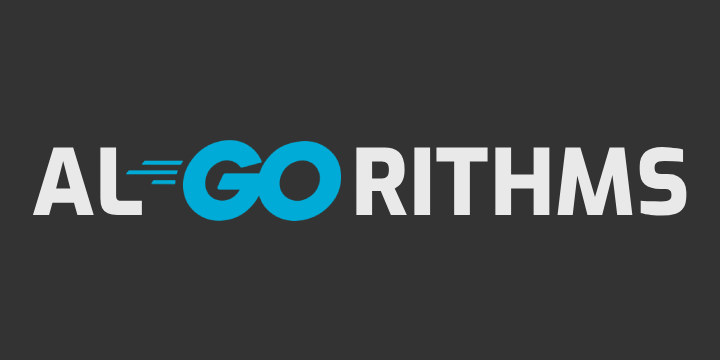
<style>
.page{position:relative;width:720px;height:360px;background:#333333}
.page>*{position:absolute;margin:0}
.t1{font:91px "ExoRoman-ExtraBold";color:#e9e9e9}
</style>
<div class="page">
<p class="t1" style="left:32px;top:146px;width:655px;height:70px">AL         RITHMS</p>
</div>
